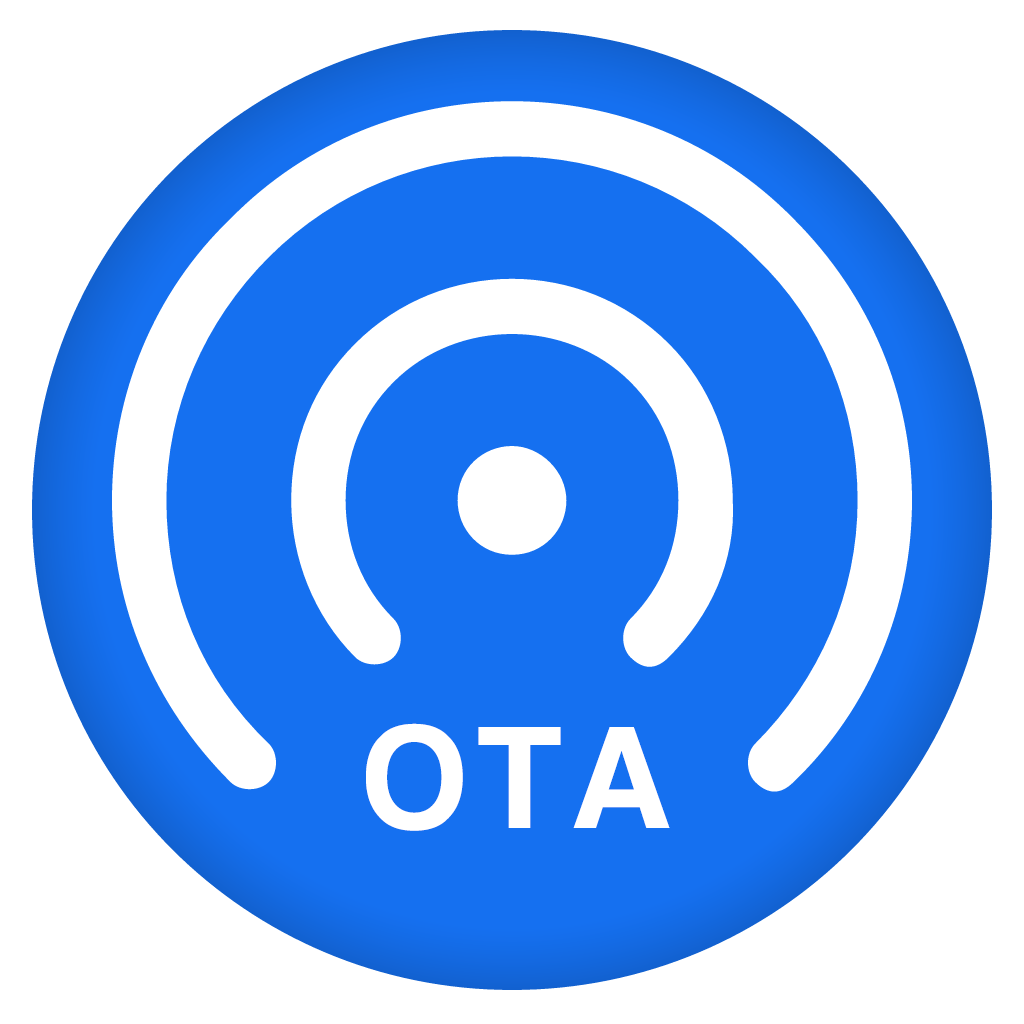
<style>
.page{position:relative;width:1024px;height:1024px;background:#ffffff}
.page>*{position:absolute;margin:0}
.t1{font:140px "Helvetica-Bold";letter-spacing:0.06em;color:#ffffff}
</style>
<div class="page">
<p class="t1" style="left:366px;top:723px;width:304px;height:108px">OTA</p>
</div>
